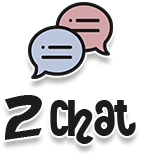
<style>
.page{position:relative;width:141px;height:154px;background:#ffffff}
.page>*{position:absolute;margin:0}
.t1{font:66.7px "PokemonNormal";color:#1c1c1c}
.t2{font:53.3px "NightCourt";color:#1c1c1c}
</style>
<div class="page">
<p class="t1" style="left:4px;top:95px;width:38px;height:45px">2</p>
<p class="t2" style="left:50px;top:100px;width:86px;height:44px">CHAT</p>
</div>
